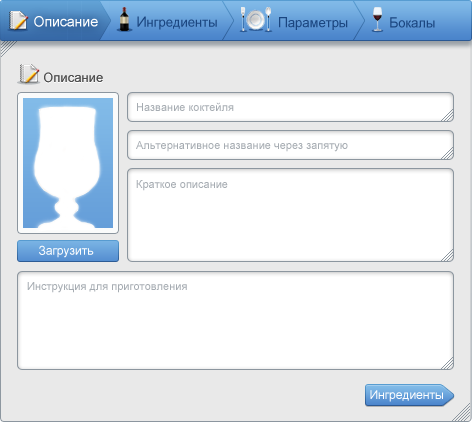
<style>
.page{position:relative;width:472px;height:422px;background:#ffffff}
.page>*{position:absolute;margin:0}
.t1{font:14px "ArialMT";color:#ffffff;font-weight:bold}
.t2{font:13px "ArialMT";color:#1b4680;font-weight:bold}
.t3{font:14px "ArialMT";color:#1b4680;font-weight:bold}
.t4{font:13px "ArialMT"}
.t5{font:13px "ArialMT";color:#505050}
.t6{font:11px "ArialMT";color:#a6acb2}
.t7{font:12px "ArialMT";color:#ffffff;font-weight:bold}
.t8{font:12px "ArialMT";color:#ffffff}
</style>
<div class="page">
<p class="t1" style="left:34px;top:16px;width:64px;height:11px">Описание</p>
<p class="t2" style="left:137px;top:16px;width:80px;height:14px"><span class="t3">И</span>нгредиенты</p>
<p class="t2" style="left:279px;top:17px;width:69px;height:13px"><span class="t3">П</span>араметры</p>
<p class="t2" style="left:390px;top:17px;width:45px;height:11px"><span class="t3">Б</span>окалы</p>
<p class="t4" style="left:44px;top:73px;width:59px;height:11px">Описание</p>
<p class="t5" style="left:44px;top:72px;width:59px;height:11px">Описание</p>
<p class="t6" style="left:137px;top:102px;width:97px;height:9px">Название коктейля</p>
<p class="t6" style="left:136px;top:141px;width:212px;height:11px">Альтернативное название через запятую</p>
<p class="t6" style="left:136px;top:180px;width:92px;height:11px">Краткое описание</p>
<p class="t7" style="left:39px;top:245px;width:55px;height:13px">Загрузить</p>
<p class="t6" style="left:27px;top:282px;width:160px;height:11px">Инструкция для приготовления</p>
<p class="t8" style="left:370px;top:390px;width:73px;height:12px">Ингредиенты</p>
</div>
